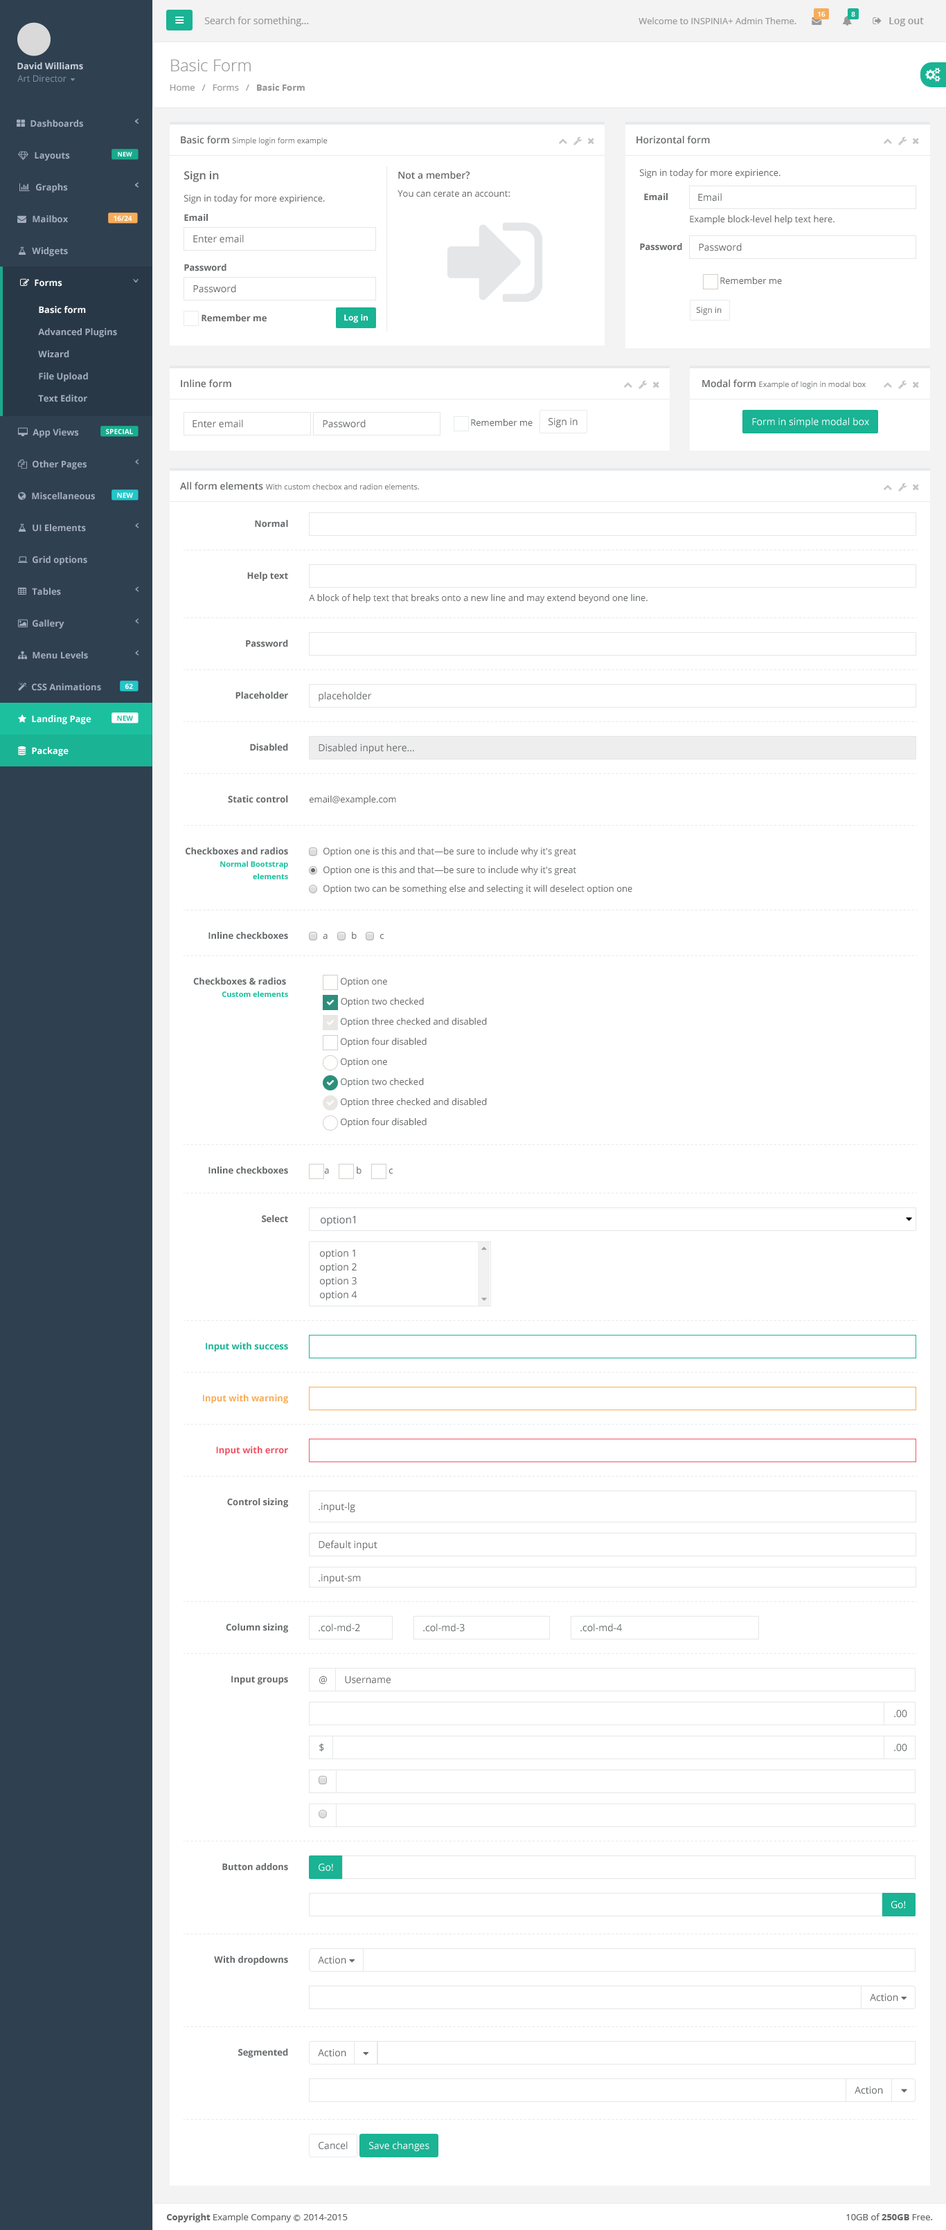
<style>
.page{position:relative;width:946px;height:2230px;background:#ffffff}
.page>*{position:absolute;margin:0}
.t1{font:9.7px "OpenSans";color:#999999}
.t2{font:9px "OpenSans";color:#999999}
.t3{font:6.9px "OpenSans-Semibold";color:#ffffff}
.t4{font:9.7px "OpenSans-Semibold";color:#999999}
.t5{font:9px "OpenSans-Bold";color:#cad1db}
.t6{font:16.6px "OpenSans-Light";color:#999999}
.t7{font:9px "OpenSans";color:#7d93a5}
.t8{font:9px "OpenSans-Bold";color:#999999}
.t9{font:9px "OpenSans-Bold";color:#a2acbd}
.t10{font:7.6px "OpenSans";color:#676a6c}
.t11{font:9.7px "OpenSans-Semibold";color:#676a6c}
.t12{font:6.2px "OpenSans-Bold";color:#fefefe}
.t13{font:11.1px "OpenSans-Semibold";color:#676a6c}
.t14{font:9px "OpenSans";color:#676a6c}
.t15{font:9px "OpenSans-Bold";color:#676a6c}
.t16{font:9.7px "OpenSans";color:#676a6c}
.t17{font:6.9px "OpenSans-Bold";color:#fefefe}
.t18{font:9px "OpenSans-Bold";color:#ffffff}
.t19{font:8.3px "OpenSans-Bold";color:#ffffff}
.t20{font:8.3px "OpenSans";color:#676a6c}
.t21{font:9.7px "OpenSans";color:#ffffff}
.t22{font:6.9px "OpenSans-Bold";color:#1cc09f}
.t23{font:7.6px/12.5px "OpenSans-Bold";color:#1cc09f}
.t24{font:7.6px "OpenSans-Bold";color:#1cc09f}
.t25{font:10.4px "OpenSans";color:#676a6c}
.t26{font:9px "OpenSans-Bold";color:#1ab394}
.t27{font:9px "OpenSans-Bold";color:#f8ac59}
.t28{font:9px "OpenSans-Bold";color:#ed5565}
.t29{font:9px "OpenSans";color:#666666}
.t30{font:9px "OpenSans-Bold";color:#666666}
.t31{font:6.9px "Meiryo";color:#666666}
</style>
<div class="page">
<p class="t1" style="left:204px;top:17px;width:105px;height:9px">Search for something...</p>
<p class="t2" style="left:638px;top:17px;width:158px;height:7px">Welcome to INSPINIA+ Admin Theme.</p>
<p class="t3" style="left:818px;top:12px;width:7px;height:5px">16</p>
<p class="t3" style="left:851px;top:12px;width:4px;height:5px">8</p>
<p class="t4" style="left:889px;top:17px;width:34px;height:9px">Log out</p>
<p class="t5" style="left:17px;top:62px;width:66px;height:8px">David Williams</p>
<p class="t6" style="left:171px;top:60px;width:80px;height:11px">Basic Form</p>
<p class="t7" style="left:17px;top:75px;width:49px;height:7px">Art Director</p>
<p class="t2" style="left:170px;top:84px;width:135px;height:7px">Home   /   Forms   /   <span class="t8">Basic Form</span></p>
<p class="t9" style="left:30px;top:120px;width:53px;height:7px">Dashboards</p>
<p class="t10" style="left:181px;top:136px;width:146px;height:9px"><span class="t11">Basic form </span>Simple login form example</p>
<p class="t11" style="left:636px;top:136px;width:74px;height:8px">Horizontal form</p>
<p class="t9" style="left:35px;top:152px;width:35px;height:9px">Layouts</p>
<p class="t12" style="left:118px;top:152px;width:14px;height:4px">NEW</p>
<p class="t13" style="left:184px;top:171px;width:35px;height:11px">Sign in</p>
<p class="t11" style="left:398px;top:171px;width:72px;height:8px">Not a member?</p>
<p class="t14" style="left:640px;top:169px;width:140px;height:9px">Sign in today for more expirience.</p>
<p class="t9" style="left:36px;top:183px;width:32px;height:9px">Graphs</p>
<p class="t14" style="left:184px;top:195px;width:141px;height:9px">Sign in today for more expirience.</p>
<p class="t14" style="left:397px;top:190px;width:112px;height:7px">You can cerate an account:</p>
<p class="t15" style="left:644px;top:193px;width:23px;height:8px">Email</p>
<p class="t16" style="left:698px;top:193px;width:23px;height:8px">Email</p>
<p class="t9" style="left:33px;top:215px;width:35px;height:8px">Mailbox</p>
<p class="t17" style="left:114px;top:215px;width:18px;height:6px">16/24</p>
<p class="t15" style="left:184px;top:214px;width:24px;height:8px">Email</p>
<p class="t14" style="left:689px;top:215px;width:145px;height:9px">Example block-level help text here.</p>
<p class="t16" style="left:193px;top:235px;width:51px;height:8px">Enter email</p>
<p class="t15" style="left:640px;top:243px;width:42px;height:8px">Password</p>
<p class="t16" style="left:698px;top:243px;width:43px;height:8px">Password</p>
<p class="t9" style="left:32px;top:247px;width:36px;height:9px">Widgets</p>
<p class="t15" style="left:184px;top:264px;width:42px;height:7px">Password</p>
<p class="t18" style="left:35px;top:279px;width:27px;height:8px">Forms</p>
<p class="t14" style="left:720px;top:277px;width:62px;height:8px">Remember me</p>
<p class="t16" style="left:193px;top:285px;width:43px;height:8px">Password</p>
<p class="t18" style="left:39px;top:306px;width:47px;height:8px">Basic form</p>
<p class="t15" style="left:201px;top:314px;width:66px;height:8px">Remember me</p>
<p class="t19" style="left:344px;top:314px;width:24px;height:9px">Log in</p>
<p class="t20" style="left:696px;top:307px;width:25px;height:8px">Sign in</p>
<p class="t9" style="left:38px;top:328px;width:79px;height:9px">Advanced Plugins</p>
<p class="t9" style="left:38px;top:350px;width:31px;height:8px">Wizard</p>
<p class="t9" style="left:39px;top:372px;width:49px;height:9px">File Upload</p>
<p class="t11" style="left:181px;top:379px;width:50px;height:9px">Inline form</p>
<p class="t10" style="left:702px;top:379px;width:163px;height:10px"><span class="t11">Modal form </span>Example of login in modal box</p>
<p class="t9" style="left:38px;top:395px;width:49px;height:7px">Text Editor</p>
<p class="t16" style="left:192px;top:419px;width:51px;height:9px">Enter email</p>
<p class="t16" style="left:323px;top:419px;width:42px;height:9px">Password</p>
<p class="t14" style="left:471px;top:419px;width:61px;height:7px">Remember me</p>
<p class="t16" style="left:548px;top:417px;width:29px;height:11px">Sign in</p>
<p class="t21" style="left:752px;top:417px;width:117px;height:11px">Form in simple modal box</p>
<p class="t9" style="left:33px;top:428px;width:46px;height:9px">App Views</p>
<p class="t17" style="left:106px;top:428px;width:27px;height:6px">SPECIAL</p>
<p class="t9" style="left:33px;top:460px;width:54px;height:9px">Other Pages</p>
<p class="t10" style="left:180px;top:482px;width:239px;height:8px"><span class="t11">All form elements </span>With custom checbox and radion elements.</p>
<p class="t9" style="left:32px;top:492px;width:63px;height:8px">Miscellaneous</p>
<p class="t17" style="left:117px;top:492px;width:16px;height:6px">NEW</p>
<p class="t15" style="left:255px;top:520px;width:33px;height:7px">Normal</p>
<p class="t9" style="left:33px;top:524px;width:53px;height:8px">UI Elements</p>
<p class="t9" style="left:33px;top:556px;width:54px;height:9px">Grid options</p>
<p class="t15" style="left:247px;top:572px;width:41px;height:9px">Help text</p>
<p class="t9" style="left:32px;top:588px;width:29px;height:7px">Tables</p>
<p class="t14" style="left:309px;top:594px;width:338px;height:9px">A block of help text that breaks onto a new line and may extend beyond one line.</p>
<p class="t9" style="left:33px;top:620px;width:31px;height:9px">Gallery</p>
<p class="t15" style="left:246px;top:640px;width:42px;height:7px">Password</p>
<p class="t9" style="left:33px;top:651px;width:55px;height:8px">Menu Levels</p>
<p class="t9" style="left:32px;top:683px;width:69px;height:8px">CSS Animations</p>
<p class="t17" style="left:125px;top:683px;width:8px;height:6px">62</p>
<p class="t15" style="left:235px;top:692px;width:53px;height:7px">Placeholder</p>
<p class="t16" style="left:318px;top:692px;width:54px;height:10px">placeholder</p>
<p class="t18" style="left:32px;top:715px;width:59px;height:9px">Landing Page</p>
<p class="t22" style="left:117px;top:715px;width:16px;height:6px">NEW</p>
<p class="t18" style="left:32px;top:747px;width:37px;height:9px">Package</p>
<p class="t15" style="left:250px;top:743px;width:38px;height:8px">Disabled</p>
<p class="t16" style="left:318px;top:743px;width:96px;height:11px">Disabled input here...</p>
<p class="t15" style="left:228px;top:795px;width:60px;height:8px">Static control</p>
<p class="t14" style="left:309px;top:795px;width:87px;height:9px">email@example.com</p>
<p class="t15" style="left:186px;top:847px;width:102px;height:8px">Checkboxes and radios</p>
<p class="t14" style="left:323px;top:847px;width:253px;height:9px">Option one is this and that—be sure to include why it's great</p>
<p class="t23" style="left:220px;top:860px;width:68px;height:19px;text-align:right">Normal Bootstrap<br>elements</p>
<p class="t14" style="left:323px;top:866px;width:253px;height:9px">Option one is this and that—be sure to include why it's great</p>
<p class="t14" style="left:323px;top:885px;width:309px;height:9px">Option two can be something else and selecting it will deselect option one</p>
<p class="t15" style="left:208px;top:932px;width:80px;height:7px">Inline checkboxes</p>
<p class="t14" style="left:323px;top:934px;width:4px;height:5px">a</p>
<p class="t14" style="left:352px;top:932px;width:4px;height:7px">b</p>
<p class="t14" style="left:380px;top:934px;width:3px;height:5px">c</p>
<p class="t15" style="left:193px;top:977px;width:93px;height:8px">Checkboxes &amp; radios</p>
<p class="t14" style="left:341px;top:977px;width:46px;height:9px">Option one</p>
<p class="t24" style="left:222px;top:991px;width:66px;height:6px">Custom elements</p>
<p class="t14" style="left:341px;top:997px;width:83px;height:9px">Option two checked</p>
<p class="t14" style="left:341px;top:1018px;width:146px;height:9px">Option three checked and disabled</p>
<p class="t14" style="left:341px;top:1038px;width:85px;height:9px">Option four disabled</p>
<p class="t14" style="left:341px;top:1058px;width:46px;height:9px">Option one</p>
<p class="t14" style="left:341px;top:1078px;width:83px;height:9px">Option two checked</p>
<p class="t14" style="left:341px;top:1098px;width:146px;height:9px">Option three checked and disabled</p>
<p class="t14" style="left:341px;top:1118px;width:85px;height:9px">Option four disabled</p>
<p class="t15" style="left:208px;top:1166px;width:80px;height:8px">Inline checkboxes</p>
<p class="t14" style="left:324px;top:1168px;width:5px;height:6px">a</p>
<p class="t14" style="left:356px;top:1166px;width:5px;height:8px">b</p>
<p class="t14" style="left:389px;top:1168px;width:3px;height:6px">c</p>
<p class="t15" style="left:262px;top:1215px;width:26px;height:7px">Select</p>
<p class="t25" style="left:320px;top:1216px;width:35px;height:10px">option1</p>
<p class="t16" style="left:320px;top:1249px;width:35px;height:10px">option 1</p>
<p class="t16" style="left:320px;top:1263px;width:36px;height:10px">option 2</p>
<p class="t16" style="left:320px;top:1276px;width:36px;height:11px">option 3</p>
<p class="t16" style="left:320px;top:1290px;width:37px;height:11px">option 4</p>
<p class="t26" style="left:206px;top:1342px;width:82px;height:9px">Input with success</p>
<p class="t27" style="left:203px;top:1394px;width:85px;height:9px">Input with warning</p>
<p class="t28" style="left:216px;top:1446px;width:72px;height:9px">Input with error</p>
<p class="t15" style="left:227px;top:1498px;width:61px;height:9px">Control sizing</p>
<p class="t16" style="left:318px;top:1502px;width:37px;height:11px">.input-lg</p>
<p class="t16" style="left:318px;top:1540px;width:59px;height:11px">Default input</p>
<p class="t16" style="left:318px;top:1573px;width:43px;height:11px">.input-sm</p>
<p class="t15" style="left:226px;top:1623px;width:62px;height:9px">Column sizing</p>
<p class="t16" style="left:318px;top:1623px;width:42px;height:9px">.col-md-2</p>
<p class="t16" style="left:423px;top:1623px;width:41px;height:9px">.col-md-3</p>
<p class="t16" style="left:580px;top:1623px;width:42px;height:9px">.col-md-4</p>
<p class="t15" style="left:231px;top:1675px;width:57px;height:9px">Input groups</p>
<p class="t16" style="left:319px;top:1676px;width:8px;height:8px">@</p>
<p class="t16" style="left:345px;top:1676px;width:45px;height:7px">Username</p>
<p class="t16" style="left:894px;top:1709px;width:13px;height:8px">.00</p>
<p class="t16" style="left:319px;top:1743px;width:5px;height:8px">$</p>
<p class="t16" style="left:894px;top:1743px;width:13px;height:8px">.00</p>
<p class="t15" style="left:222px;top:1863px;width:66px;height:7px">Button addons</p>
<p class="t21" style="left:318px;top:1863px;width:15px;height:8px">Go!</p>
<p class="t21" style="left:890px;top:1900px;width:15px;height:8px">Go!</p>
<p class="t15" style="left:214px;top:1956px;width:74px;height:9px">With dropdowns</p>
<p class="t16" style="left:318px;top:1956px;width:28px;height:8px">Action</p>
<p class="t16" style="left:869px;top:1993px;width:29px;height:8px">Action</p>
<p class="t15" style="left:238px;top:2048px;width:50px;height:9px">Segmented</p>
<p class="t16" style="left:318px;top:2048px;width:28px;height:9px">Action</p>
<p class="t16" style="left:854px;top:2086px;width:29px;height:8px">Action</p>
<p class="t16" style="left:318px;top:2141px;width:29px;height:8px">Cancel</p>
<p class="t21" style="left:369px;top:2141px;width:60px;height:10px">Save changes</p>
<p class="t29" style="left:166px;top:2213px;width:181px;height:9px"><span class="t30">Copyright</span> Example Company <span class="t31">Ⓒ </span>2014-2015</p>
<p class="t29" style="left:846px;top:2213px;width:86px;height:7px">10GB of <span class="t30">250GB</span> Free.</p>
</div>
